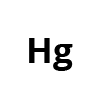
<style>
.page{position:relative;width:100px;height:100px;background:#ffffff}
.page>*{position:absolute;margin:0}
.t1{font:35px "OpenSans-Bold";color:#000000}
</style>
<div class="page">
<p class="t1" style="left:29px;top:38px;width:44px;height:33px">Hg</p>
</div>
